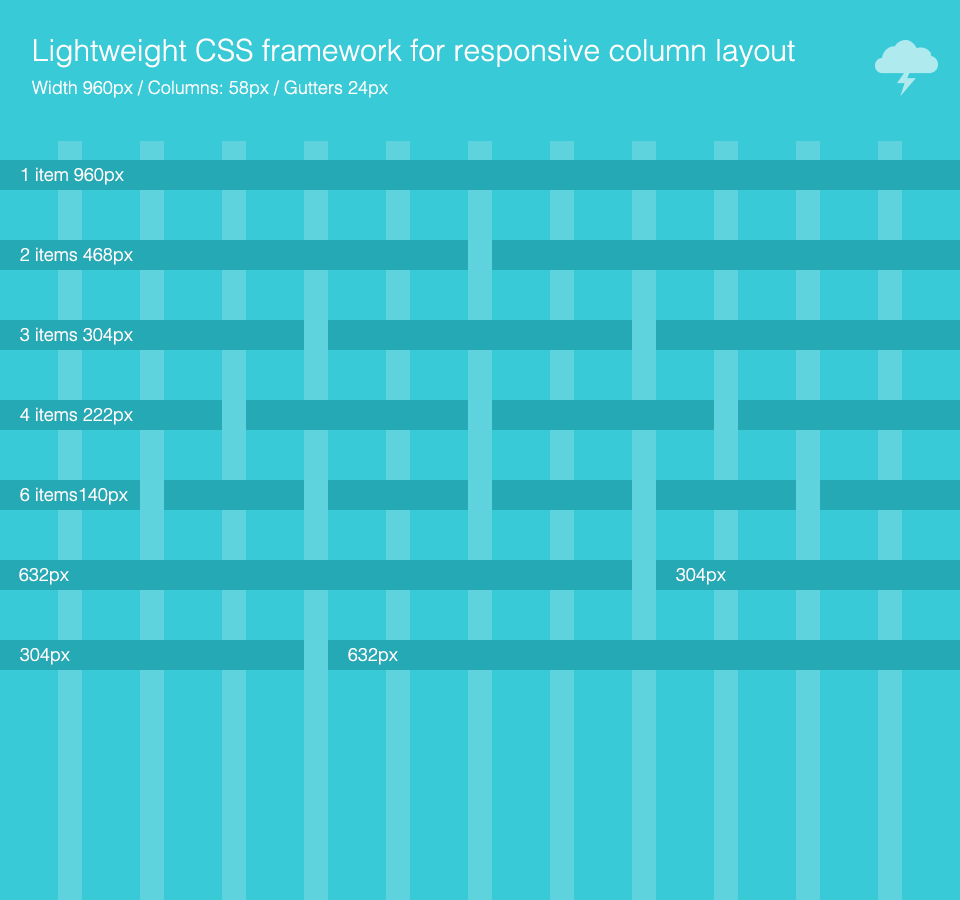
<style>
.page{position:relative;width:960px;height:900px;background:#38cad7}
.page>*{position:absolute;margin:0}
.t1{font:30px/33px "Helvetica-Light";color:#ffffff}
.t2{font:18px/33px "Helvetica-Light";color:#ffffff}
.t3{font:18px "Helvetica-Light";color:#ffffff}
</style>
<div class="page">
<p class="t1" style="left:32px;top:38px;width:763px;height:60px">Lightweight CSS framework for responsive column layout<br><span class="t2">Width 960px / Columns: 58px / Gutters 24px</span></p>
<p class="t3" style="left:21px;top:167px;width:103px;height:18px">1 item 960px</p>
<p class="t3" style="left:20px;top:247px;width:113px;height:18px">2 items 468px</p>
<p class="t3" style="left:20px;top:327px;width:113px;height:18px">3 items 304px</p>
<p class="t3" style="left:20px;top:407px;width:113px;height:18px">4 items 222px</p>
<p class="t3" style="left:20px;top:487px;width:108px;height:18px">6 items140px</p>
<p class="t3" style="left:19px;top:568px;width:50px;height:17px">632px</p>
<p class="t3" style="left:676px;top:568px;width:50px;height:17px">304px</p>
<p class="t3" style="left:20px;top:648px;width:50px;height:17px">304px</p>
<p class="t3" style="left:348px;top:648px;width:50px;height:17px">632px</p>
</div>
